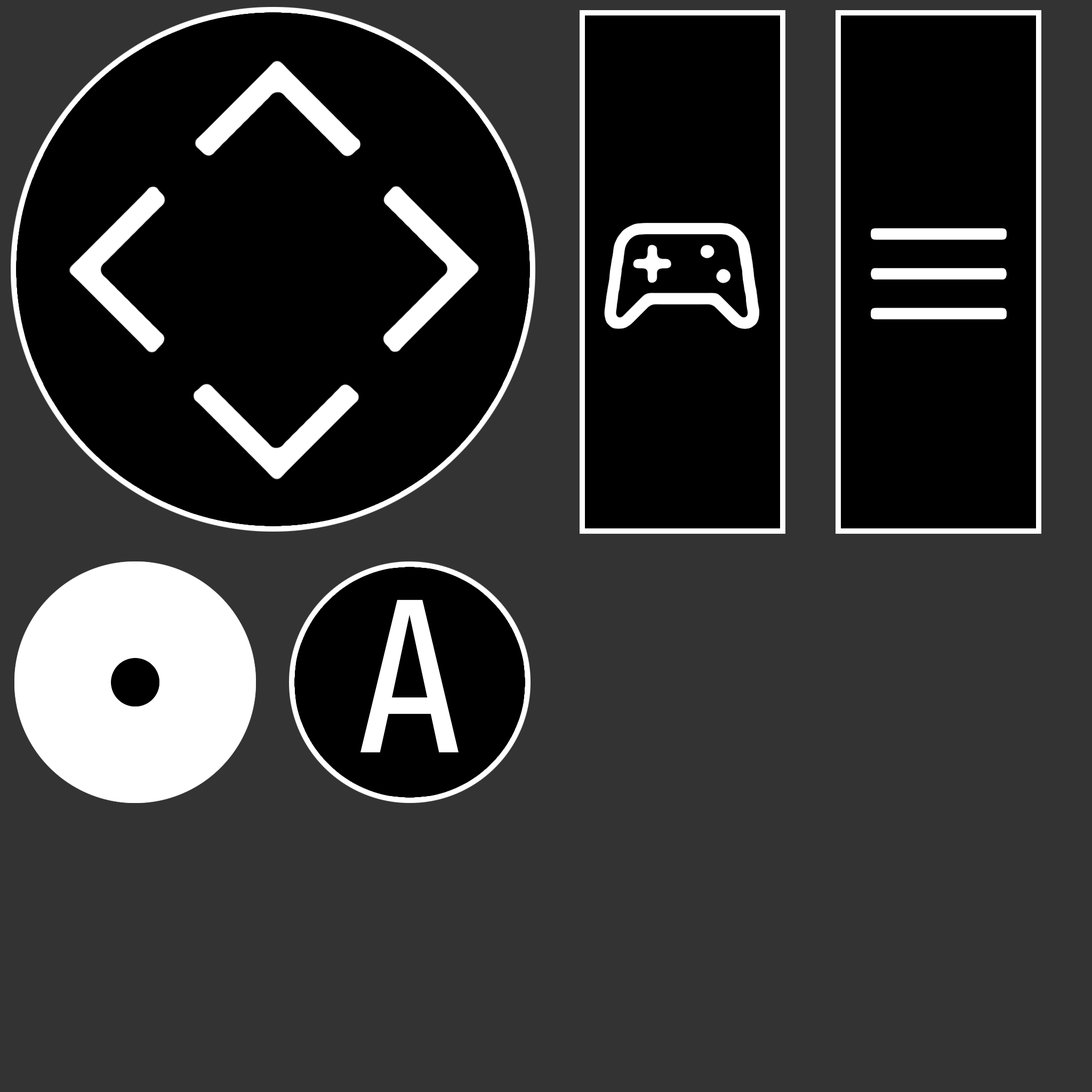
<style>
.page{position:relative;width:1092px;height:1092px;background:#333333}
.page>*{position:absolute;margin:0}
.t1{font:217.7px "ShareTech-Regular";color:#ffffff}
</style>
<div class="page">
<p class="t1" style="left:360px;top:600px;width:99px;height:152px">A</p>
</div>
